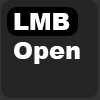
<style>
.page{position:relative;width:100px;height:100px;background:#252525}
.page>*{position:absolute;margin:0}
.t1{font:24px "Arial-Black";color:#ffffff}
</style>
<div class="page">
<p class="t1" style="left:14px;top:13px;width:66px;height:51px">LMB<br>Open</p>
</div>
